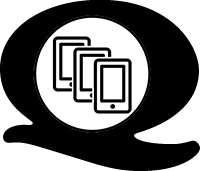
<style>
.page{position:relative;width:200px;height:171px;background:#000000}
.page>*{position:absolute;margin:0}
.t1{font:189.4px "CooperBlackStd";color:#000000;scale:1.37 1}
</style>
<div class="page">
<p class="t1" style="left:0px;top:0px;width:200px;height:171px">Q</p>
</div>
